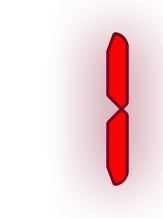
<style>
.page{position:relative;width:163px;height:218px;background:#ffffff}
.page>*{position:absolute;margin:0}
.t1{font:225.9px "Digital-7";color:#ff0000}
</style>
<div class="page">
<p class="t1" style="left:109px;top:35px;width:17px;height:148px">1</p>
</div>
